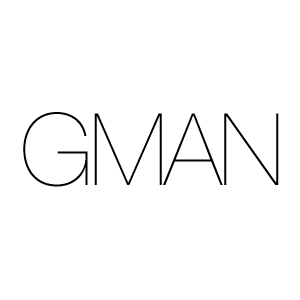
<style>
.page{position:relative;width:300px;height:300px;background:#ffffff}
.page>*{position:absolute;margin:0}
.t1{font:100px "HelveticaNeueLTStd-UltLt";letter-spacing:-0.03em;color:#000000;text-transform:uppercase}
</style>
<div class="page">
<p class="t1" style="left:23px;top:112px;width:256px;height:75px">GMAN</p>
</div>
